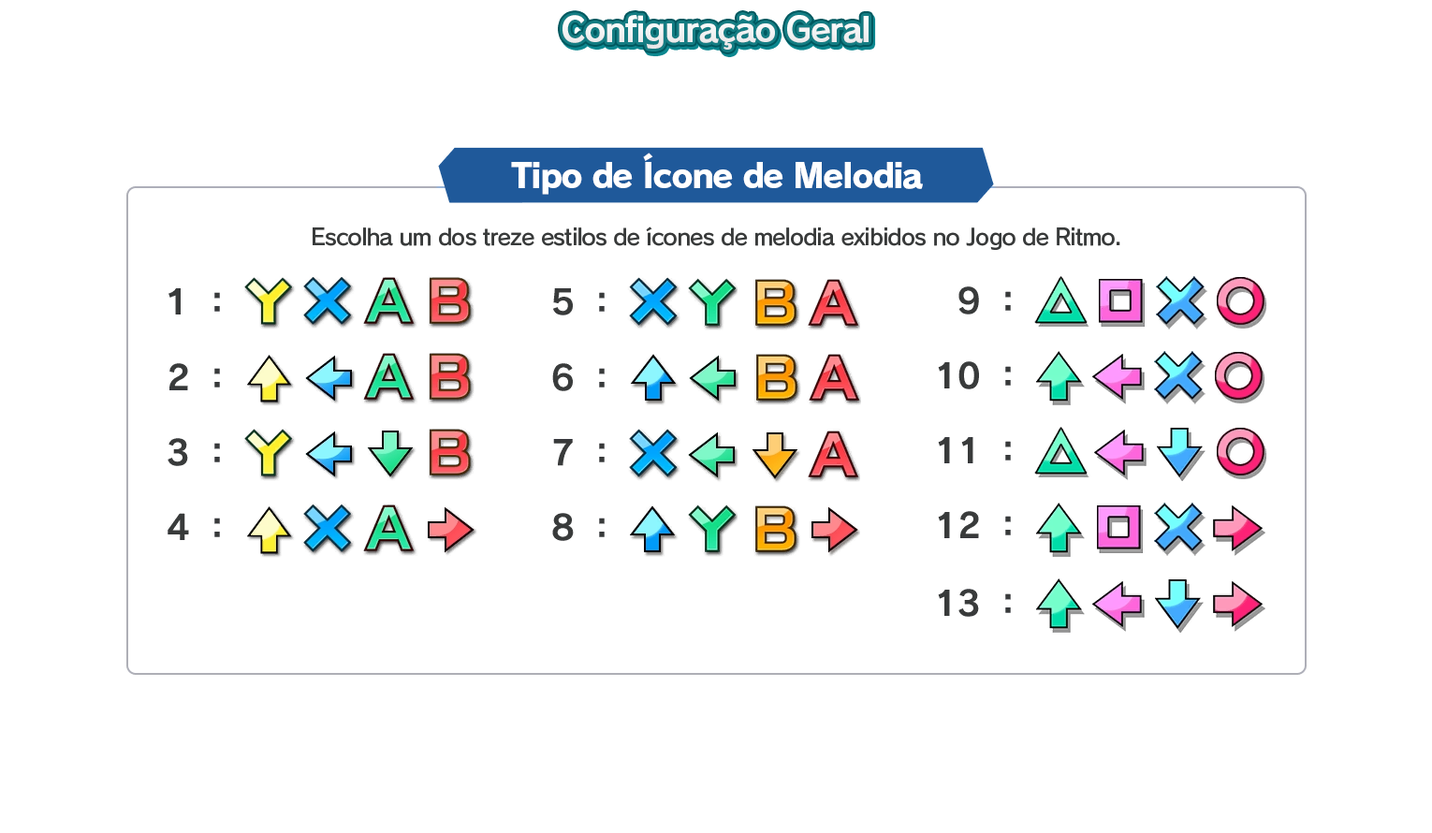
<style>
.page{position:relative;width:1432px;height:833px;background:#ffffff}
.page>*{position:absolute;margin:0}
.t1{font:33.7px "RodinPro-B";letter-spacing:-0.039em;color:#f2f3f3}
.t2{font:33.7px "RodinPro-EB";letter-spacing:-0.048em;color:#ffffff}
.t3{font:22.5px "RodinPro-DB";letter-spacing:-0.04em;color:#383a3a}
</style>
<div class="page">
<p class="t1" style="left:562px;top:15px;width:306px;height:35px">Configuração Geral</p>
<p class="t2" style="left:511px;top:153px;width:412px;height:42px">Tipo de Ícone de Melodia</p>
<p class="t3" style="left:313px;top:226px;width:807px;height:24px">Escolha um dos treze estilos de ícones de melodia exibidos no Jogo de Ritmo.</p>
</div>
